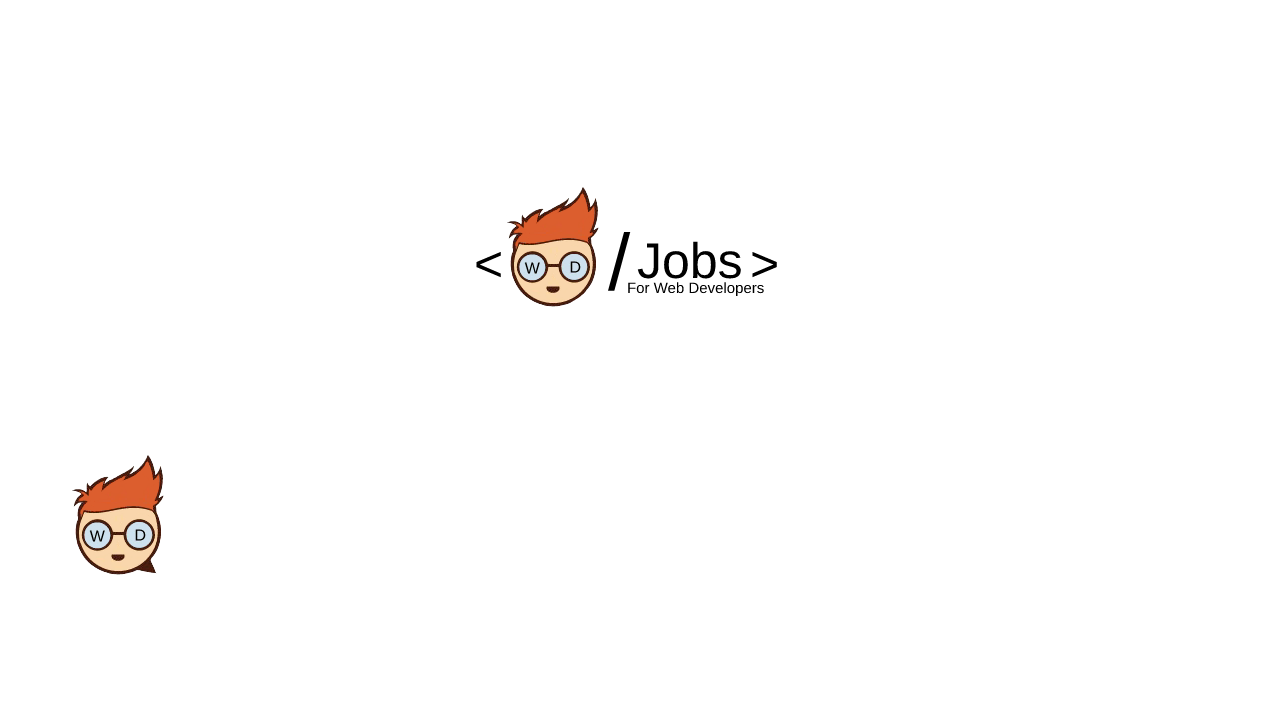
<style>
.page{position:relative;width:1280px;height:720px;background:#ffffff}
.page>*{position:absolute;margin:0}
.t1{font:80px "Arimo-Regular";color:#000000}
.t2{font:50px "Arimo-Regular";color:#000000}
.t3{font:15px "Arimo-Regular";color:#000000}
</style>
<div class="page">
<p class="t1" style="left:608px;top:232px;width:23px;height:59px">/</p>
<p class="t2" style="left:637px;top:241px;width:104px;height:38px">Jobs</p>
<p class="t2" style="left:476px;top:251px;width:25px;height:27px">&lt;</p>
<p class="t2" style="left:752px;top:251px;width:25px;height:27px">&gt;</p>
<p class="t3" style="left:628px;top:282px;width:136px;height:15px">For Web Developers</p>
</div>
